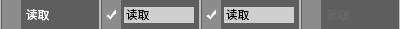
<style>
.page{position:relative;width:400px;height:29px;background:#5e5e5e}
.page>*{position:absolute;margin:0}
.t1{font:11.4px "SourceHanSansSC-Normal";color:#ffffff}
.t2{font:11.4px "SourceHanSansSC-Normal";color:#000000}
.t3{font:11.4px "SourceHanSansSC-Normal";color:#646464}
</style>
<div class="page">
<p class="t1" style="left:26px;top:9px;width:23px;height:12px">读取</p>
<p class="t2" style="left:126px;top:9px;width:23px;height:12px">读取</p>
<p class="t2" style="left:226px;top:9px;width:23px;height:12px">读取</p>
<p class="t3" style="left:326px;top:9px;width:23px;height:12px">读取</p>
</div>
